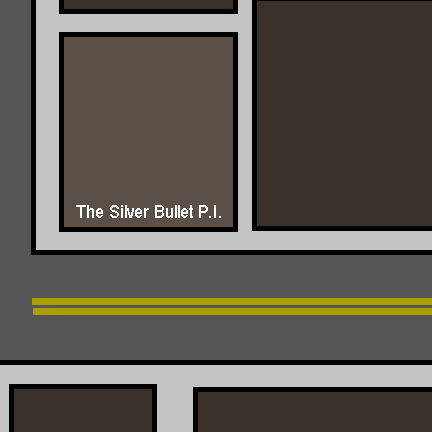
<style>
.page{position:relative;width:432px;height:432px;background:#3b312b}
.page>*{position:absolute;margin:0}
.t1{font:18px "ArialMT";color:#ffffff;scale:0.95 1}
</style>
<div class="page">
<p class="t1" style="left:76px;top:205px;width:145px;height:13px">The Silver Bullet P.I.</p>
</div>
